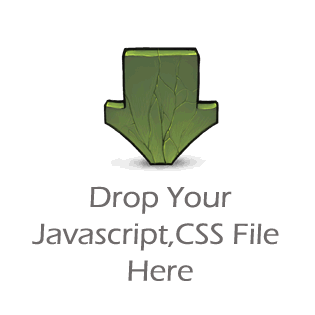
<style>
.page{position:relative;width:315px;height:315px;background:#ffffff}
.page>*{position:absolute;margin:0}
.t1{font:30px/20px "ErasITC-Medium";color:#6f6b6b;scale:1.04 1}
</style>
<div class="page">
<p class="t1" style="left:32px;top:186px;width:247px;height:95px;text-align:center">Drop Your<br>Javascript,CSS File <br>Here</p>
</div>
